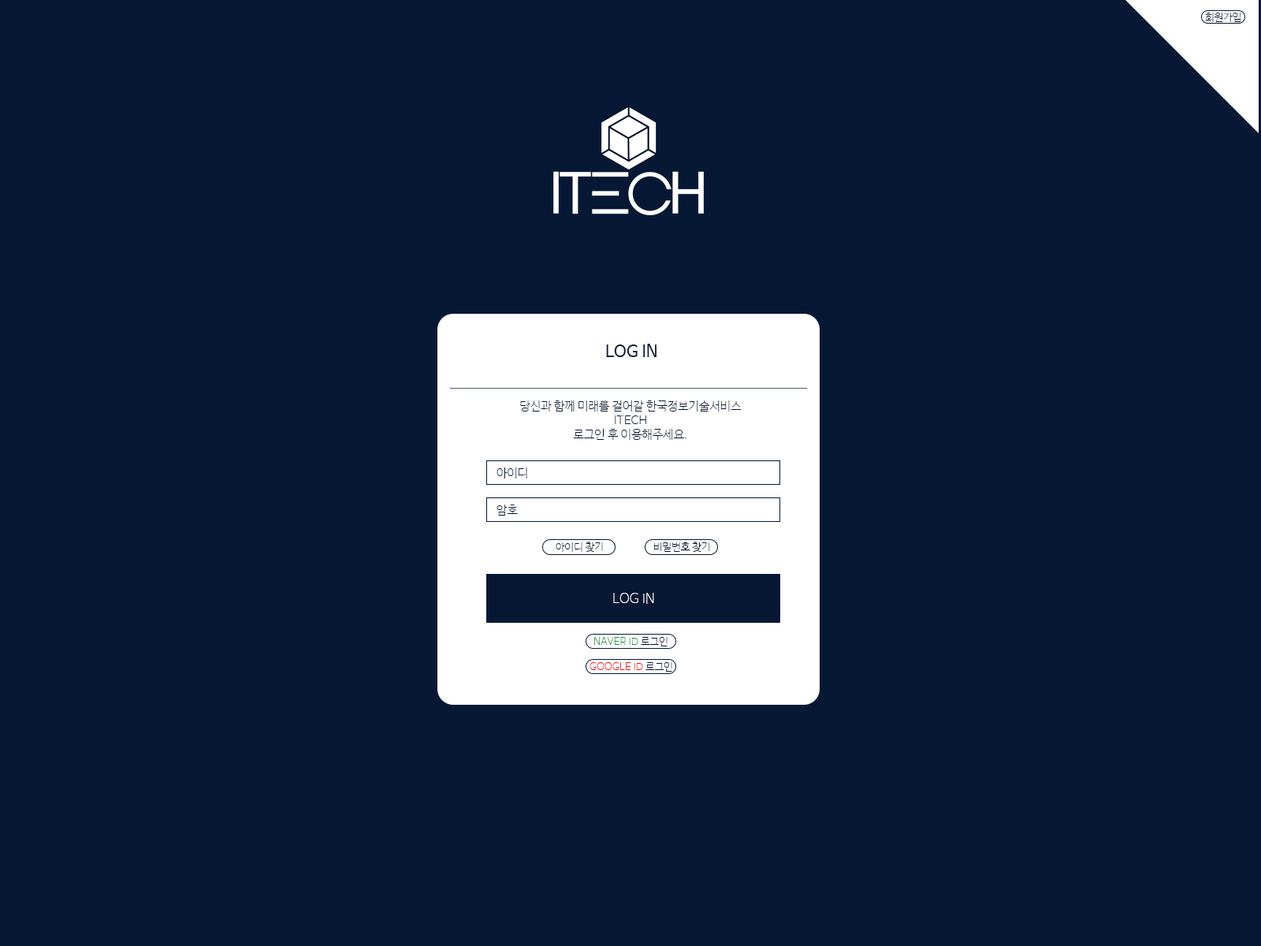
<style>
.page{position:relative;width:1261px;height:946px;background:#061834}
.page>*{position:absolute;margin:0}
.t1{font:10.2px "NanumBarunGothicUltraLight";color:#061834;text-transform:uppercase}
.t2{font:16.5px "NanumBarunGothic";color:#061834;text-transform:uppercase}
.t3{font:11.8px "NanumBarunGothicUltraLight";color:#061834;text-transform:uppercase}
.t4{font:13.4px "NanumBarunGothicUltraLight";color:#ffffff;text-transform:uppercase}
.t5{font:10.2px "NanumBarunGothicUltraLight";color:#179644}
.t6{font:10.2px "NanumBarunGothicUltraLight";color:#061834}
.t7{font:10.2px "NanumBarunGothicUltraLight";color:#ff0000}
</style>
<div class="page">
<p class="t1" style="left:1205px;top:13px;width:35px;height:9px">회원가입</p>
<p class="t2" style="left:606px;top:344px;width:50px;height:13px">LOG IN</p>
<p class="t3" style="left:520px;top:400px;width:222px;height:40px;text-align:center">당신과 함께 미래를 걸어갈 한국정보기술서비스<br>ITECH<br>로그인 후 이용해주세요.</p>
<p class="t3" style="left:496px;top:467px;width:31px;height:11px">아이디</p>
<p class="t3" style="left:496px;top:504px;width:22px;height:11px">암호</p>
<p class="t1" style="left:556px;top:541px;width:47px;height:11px">아이디 찾기</p>
<p class="t1" style="left:653px;top:541px;width:57px;height:11px">비밀번호 찾기</p>
<p class="t4" style="left:613px;top:593px;width:41px;height:11px">LOG IN</p>
<p class="t5" style="left:594px;top:637px;width:73px;height:9px">NAVER ID <span class="t6">로그인</span></p>
<p class="t7" style="left:589px;top:662px;width:83px;height:9px">GOOGLE ID<span class="t6"> 로그인</span></p>
</div>
